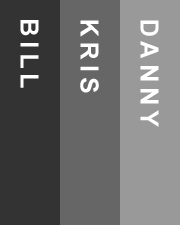
<style>
.page{position:relative;width:180px;height:225px;background:#666666}
.page>*{position:absolute;margin:0}
.t1{font:25px "Arial-BoldMT";letter-spacing:0.2em;color:#ffffff;text-transform:uppercase}
</style>
<div class="page">
<p class="t1" style="left:20px;top:20px;width:19px;height:68px;rotate:90deg">BILL</p>
<p class="t1" style="left:80px;top:20px;width:19px;height:73px;rotate:90deg">KRIS</p>
<p class="t1" style="left:140px;top:20px;width:19px;height:107px;rotate:90deg">Danny</p>
</div>
